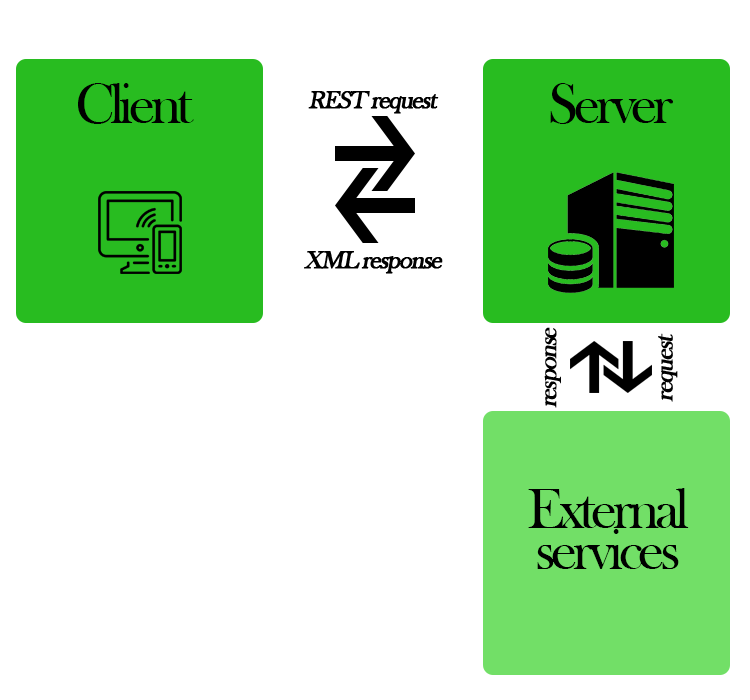
<style>
.page{position:relative;width:750px;height:700px;background:#ffffff}
.page>*{position:absolute;margin:0}
.t1{font:58.3px "BaskOldFace";letter-spacing:-0.075em;color:#000000}
.t2{font:25px "BaskOldFace";letter-spacing:-0.075em;color:#000000;font-weight:bold;font-style:italic}
.t3{font:58.3px/41.7px "BaskOldFace";letter-spacing:-0.075em;color:#000000}
</style>
<div class="page">
<p class="t1" style="left:78px;top:83px;width:116px;height:41px">Client</p>
<p class="t1" style="left:550px;top:83px;width:123px;height:41px">Server</p>
<p class="t2" style="left:308px;top:91px;width:131px;height:23px">REST request</p>
<p class="t2" style="left:304px;top:251px;width:139px;height:23px">XML response</p>
<p class="t2" style="left:544px;top:327px;width:17px;height:81px;rotate:-90deg">response</p>
<p class="t2" style="left:658px;top:333px;width:20px;height:69px;rotate:-90deg">request</p>
<p class="t3" style="left:528px;top:488px;width:161px;height:81px;text-align:center">External<br>services</p>
</div>
